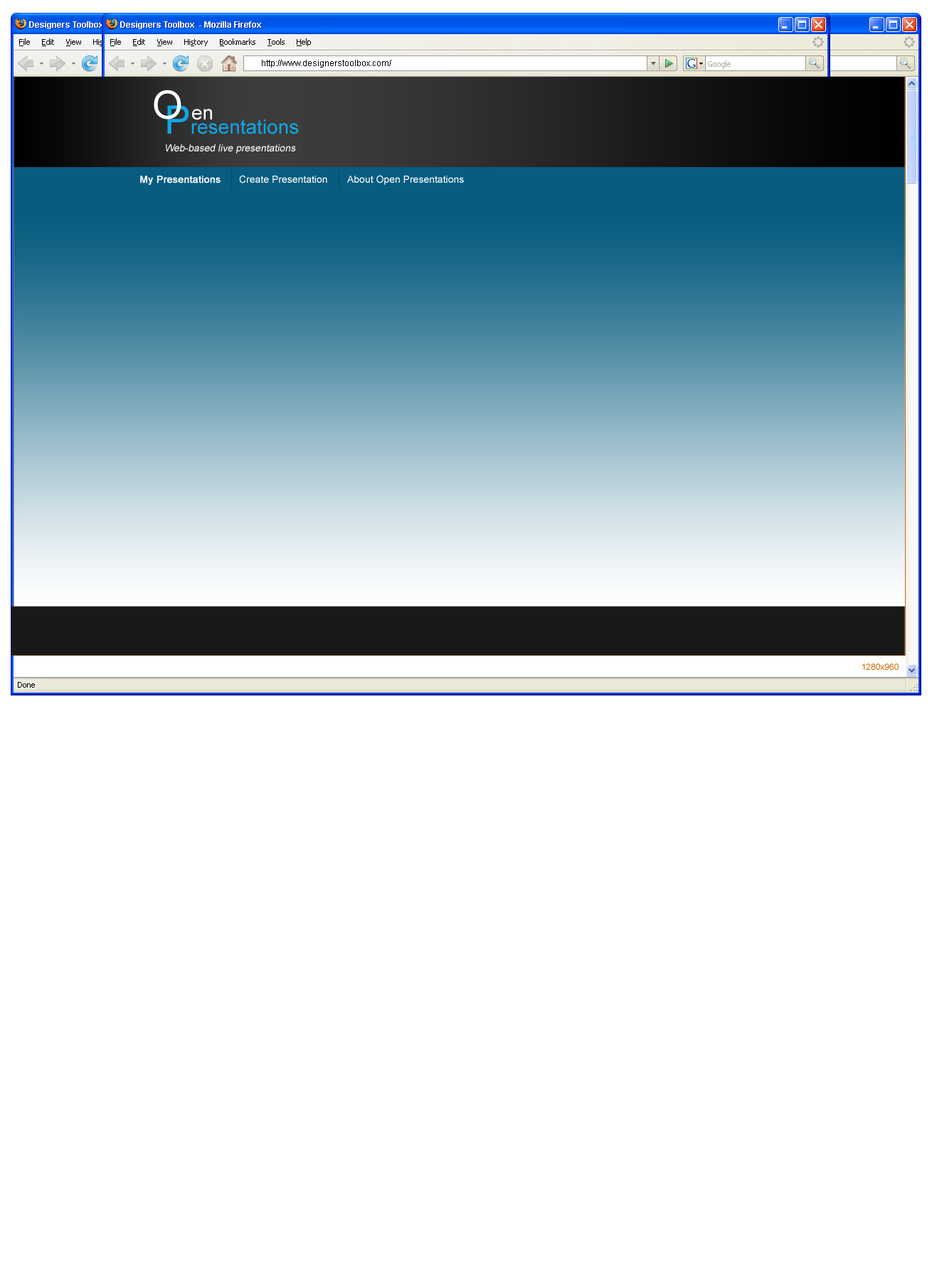
<style>
.page{position:relative;width:932px;height:1280px;background:#ffffff}
.page>*{position:absolute;margin:0}
.t1{font:8.5px "Arial-BoldMT";color:#ffffff}
.t2{font:8.5px "ArialMT";color:#000000}
.t3{font:39.1px "ArialMT";color:#ffffff}
.t4{font:19.9px "ArialMT";color:#10a6e4}
.t5{font:39.1px "ArialMT";color:#10a6e4}
.t6{font:19.9px "ArialMT";color:#ffffff}
.t7{font:10px "ArialMT";color:#fdfdfd;font-style:italic}
.t8{font:10px "ArialMT";color:#ffffff;font-weight:bold}
.t9{font:10px "ArialMT";color:#ffffff}
.t10{font:8.5px "ArialMT";color:#cc6600}
</style>
<div class="page">
<p class="t1" style="left:29px;top:21px;width:141px;height:8px">Designers Toolbox  - Mozilla Firefox</p>
<p class="t1" style="left:120px;top:21px;width:141px;height:8px">Designers Toolbox  - Mozilla Firefox</p>
<p class="t2" style="left:262px;top:60px;width:129px;height:8px">http://www.designerstoolbox.com/</p>
<p class="t3" style="left:154px;top:90px;width:27px;height:29px">O</p>
<p class="t4" style="left:167px;top:105px;width:132px;height:29px"><span class="t5">P</span>resentations</p>
<p class="t6" style="left:192px;top:109px;width:20px;height:11px">en</p>
<p class="t7" style="left:166px;top:144px;width:130px;height:10px">Web-based live presentations</p>
<p class="t8" style="left:140px;top:176px;width:80px;height:9px">My Presentations</p>
<p class="t9" style="left:239px;top:175px;width:88px;height:8px">Create Presentation</p>
<p class="t9" style="left:347px;top:175px;width:117px;height:10px">About Open Presentations</p>
<p class="t10" style="left:862px;top:663px;width:36px;height:7px">1280x960</p>
</div>
